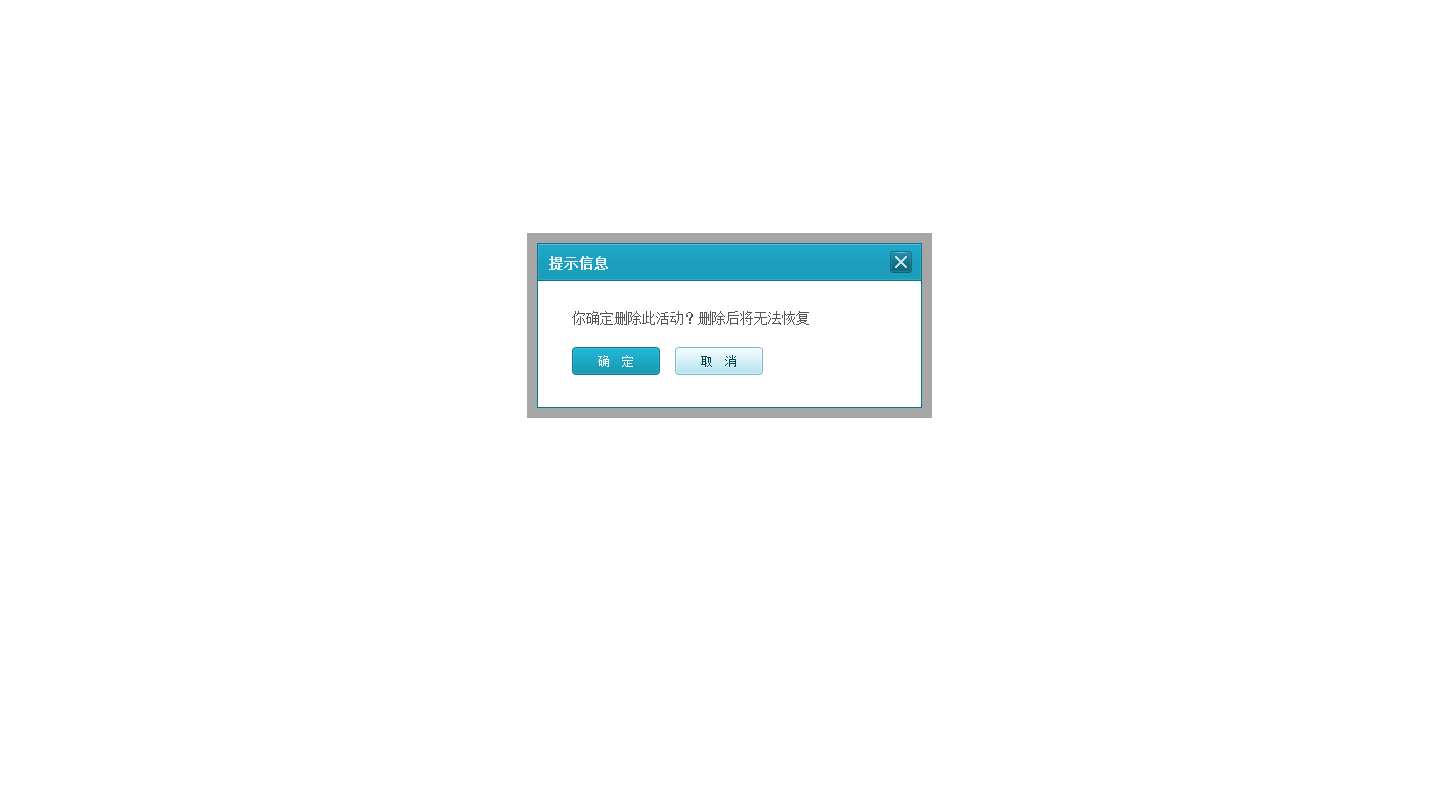
<style>
.page{position:relative;width:1440px;height:810px;background:#ffffff}
.page>*{position:absolute;margin:0}
.t1{font:14px "SimSun";color:#eef7fe;font-weight:bold}
.t2{font:14px "SimSun";color:#555555}
.t3{font:12px "SimSun";color:#ffffff}
.t4{font:12px "SimSun";color:#044455}
</style>
<div class="page">
<p class="t1" style="left:549px;top:256px;width:59px;height:14px">提示信息</p>
<p class="t2" style="left:572px;top:311px;width:237px;height:14px">你确定删除此活动？删除后将无法恢复</p>
<p class="t3" style="left:598px;top:355px;width:35px;height:12px">确  定</p>
<p class="t4" style="left:701px;top:355px;width:35px;height:12px">取  消</p>
</div>
